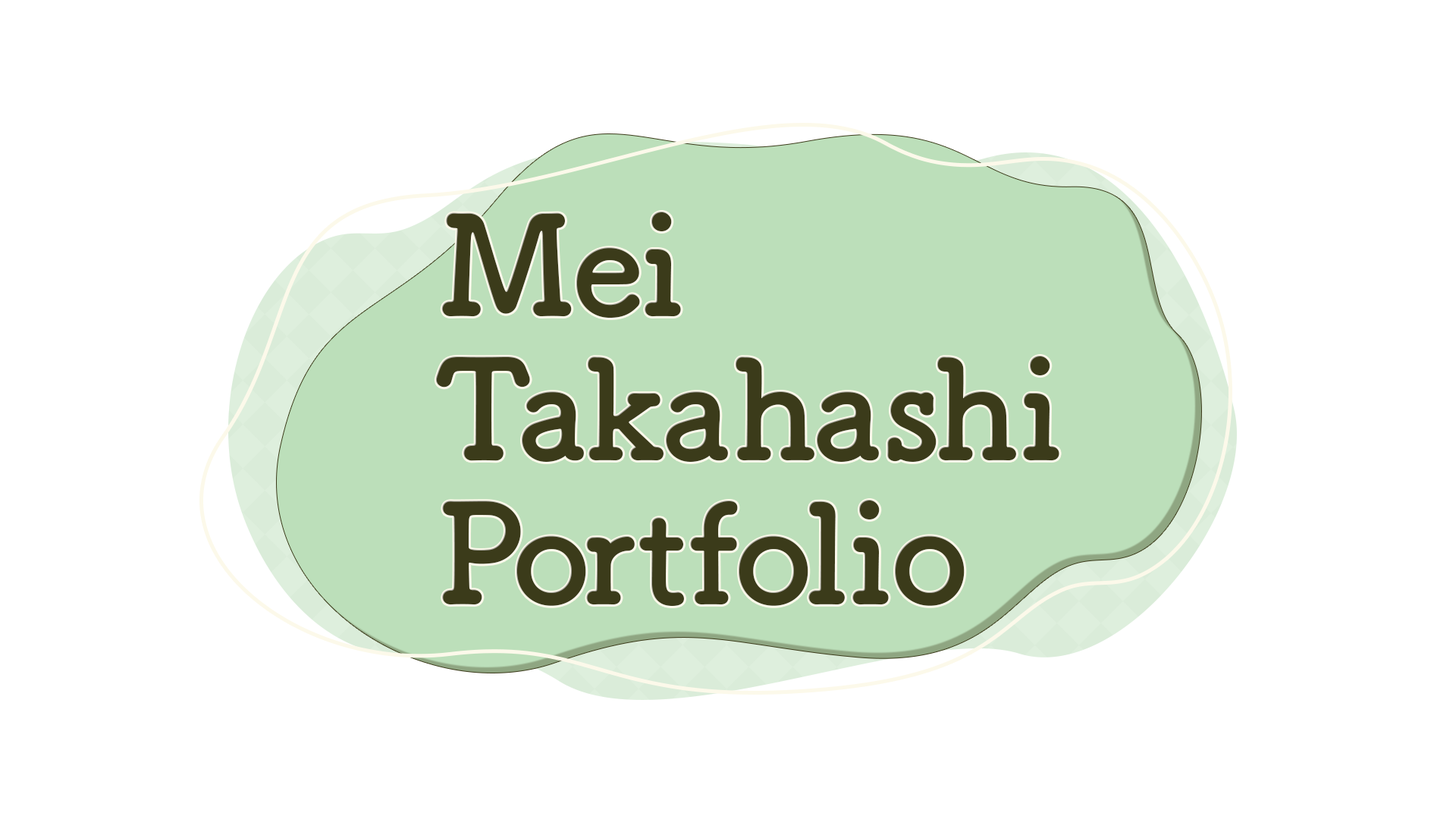
<style>
.page{position:relative;width:1456px;height:819px;background:#ffffff}
.page>*{position:absolute;margin:0}
.t1{font:136.5px/144.1px "TsukuBRdGothic-Bold";letter-spacing:-0.02em;color:#3b3b1a}
.t2{font:136.5px/144.1px "TsukuBRdGothic-Bold";letter-spacing:-0.12em;color:#3b3b1a}
.t3{font:136.5px/144.1px "TsukuBRdGothic-Bold";color:#3b3b1a}
.t4{font:136.5px/144.1px "TsukuBRdGothic-Bold";letter-spacing:-0.04em;color:#3b3b1a}
.t5{font:136.5px/144.1px "TsukuBRdGothic-Bold";letter-spacing:0.02em;color:#3b3b1a}
.t6{font:136.5px/144.1px "TsukuBRdGothic-Bold";letter-spacing:-0.06em;color:#3b3b1a}
</style>
<div class="page">
<p class="t1" style="left:436px;top:212px;width:623px;height:394px">Mei<br><span class="t2">T</span><span class="t3">a</span><span class="t4">k</span><span class="t5">a</span><span class="t4">h</span><span class="t5">a</span><span class="t4">s</span><span class="t5">hi<br></span><span class="t2">P</span><span class="t6">o</span><span class="t3">rt</span><span class="t4">f</span><span class="t6">o</span><span class="t5">l</span>io</p>
</div>
